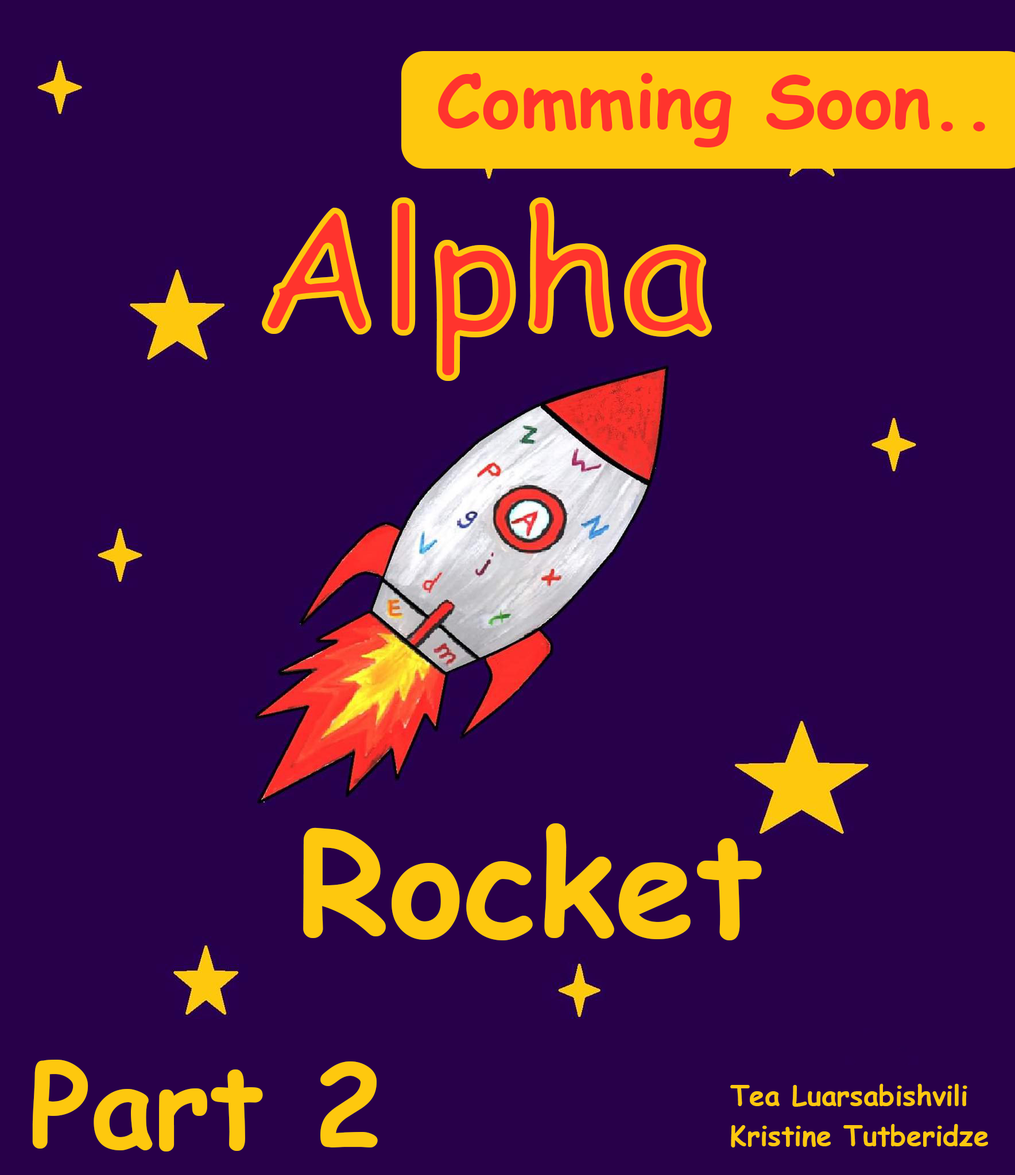
<style>
.page{position:relative;width:1015px;height:1175px;background:#280049}
.page>*{position:absolute;margin:0}
.t1{font:73.5px "ComicSansMS-Bold";color:#ff342d}
.t2{font:172.2px "ComicSansMS-Bold"}
.t3{font:143.5px "ComicSansMS-Bold";color:#fec80e}
.t4{font:114.8px "ComicSansMS-Bold";color:#fec80e}
.t5{font:27.5px "ComicSansMS-Bold";color:#fec80e}
</style>
<div class="page">
<p class="t1" style="left:438px;top:73px;width:547px;height:74px">Comming Soon..</p>
<p class="t2" style="left:262px;top:197px;width:450px;height:184px">Alpha</p>
<p class="t3" style="left:303px;top:823px;width:459px;height:118px">Rocket</p>
<p class="t4" style="left:32px;top:1060px;width:346px;height:92px">Part 2</p>
<p class="t5" style="left:730px;top:1084px;width:237px;height:23px">Tea Luarsabishvili</p>
<p class="t5" style="left:731px;top:1124px;width:257px;height:24px">Kristine Tutberidze</p>
</div>
